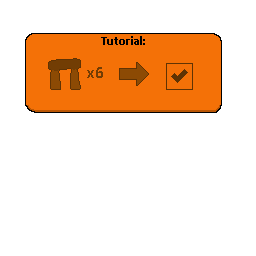
<style>
.page{position:relative;width:256px;height:256px;background:#ffffff}
.page>*{position:absolute;margin:0}
.t1{font:12.5px "Calibri-Bold";color:#000000}
.t2{font:16.7px "Calibri-Bold";color:#723d04}
</style>
<div class="page">
<p class="t1" style="left:101px;top:36px;width:44px;height:9px">Tutorial:</p>
<p class="t2" style="left:87px;top:67px;width:16px;height:11px">x6</p>
</div>
